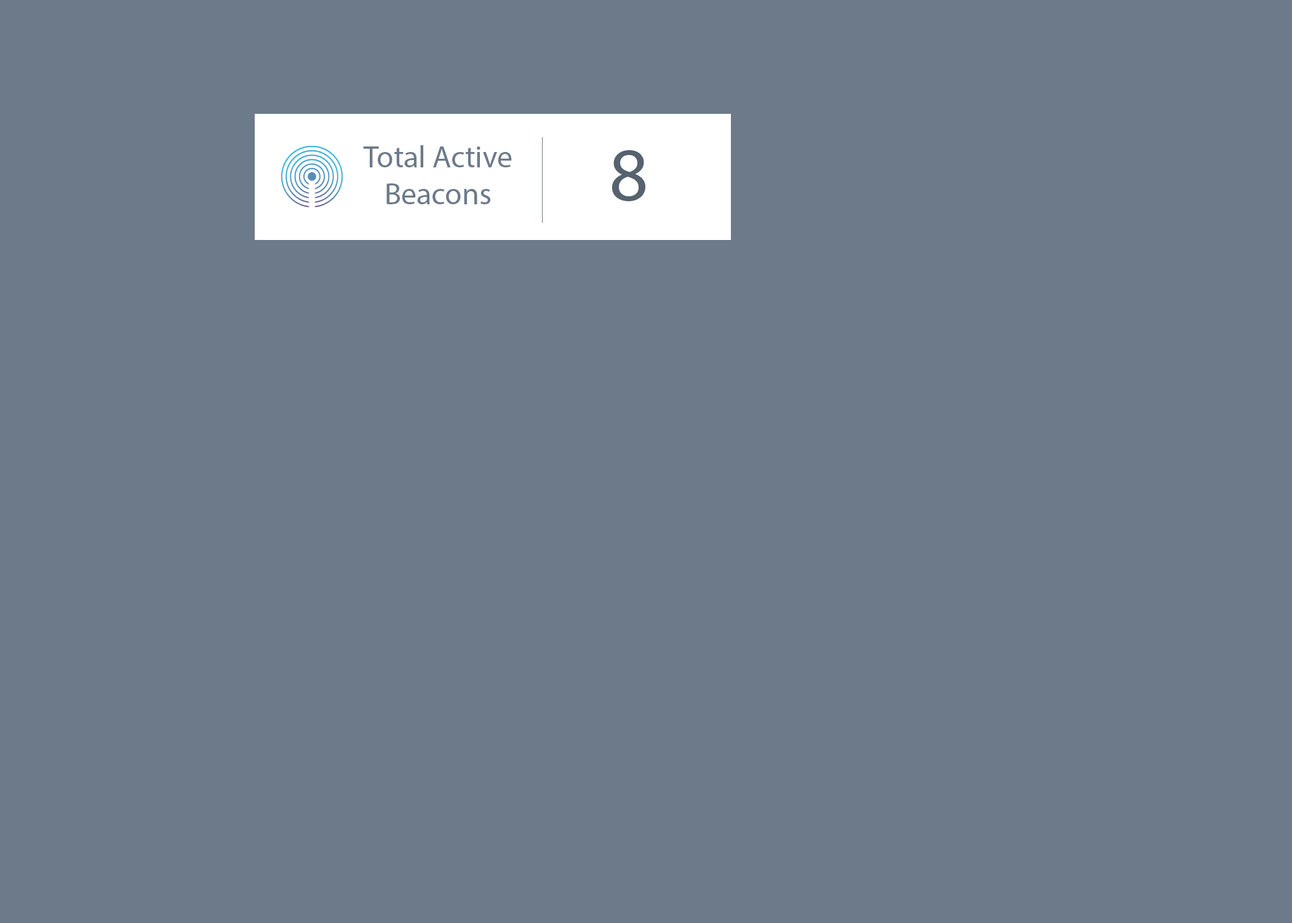
<style>
.page{position:relative;width:1292px;height:923px;background:#6c7a89}
.page>*{position:absolute;margin:0}
.t1{font:7.4px "MyriadPro-Regular";color:#6c7a89}
.t2{font:76.9px "MyriadPro-Regular";color:#56626e}
</style>
<div class="page">
<p class="t1" style="left:363px;top:145px;width:149px;height:59px;text-align:center">Total Active Beacons</p>
<p class="t2" style="left:612px;top:150px;width:33px;height:51px">8</p>
</div>
